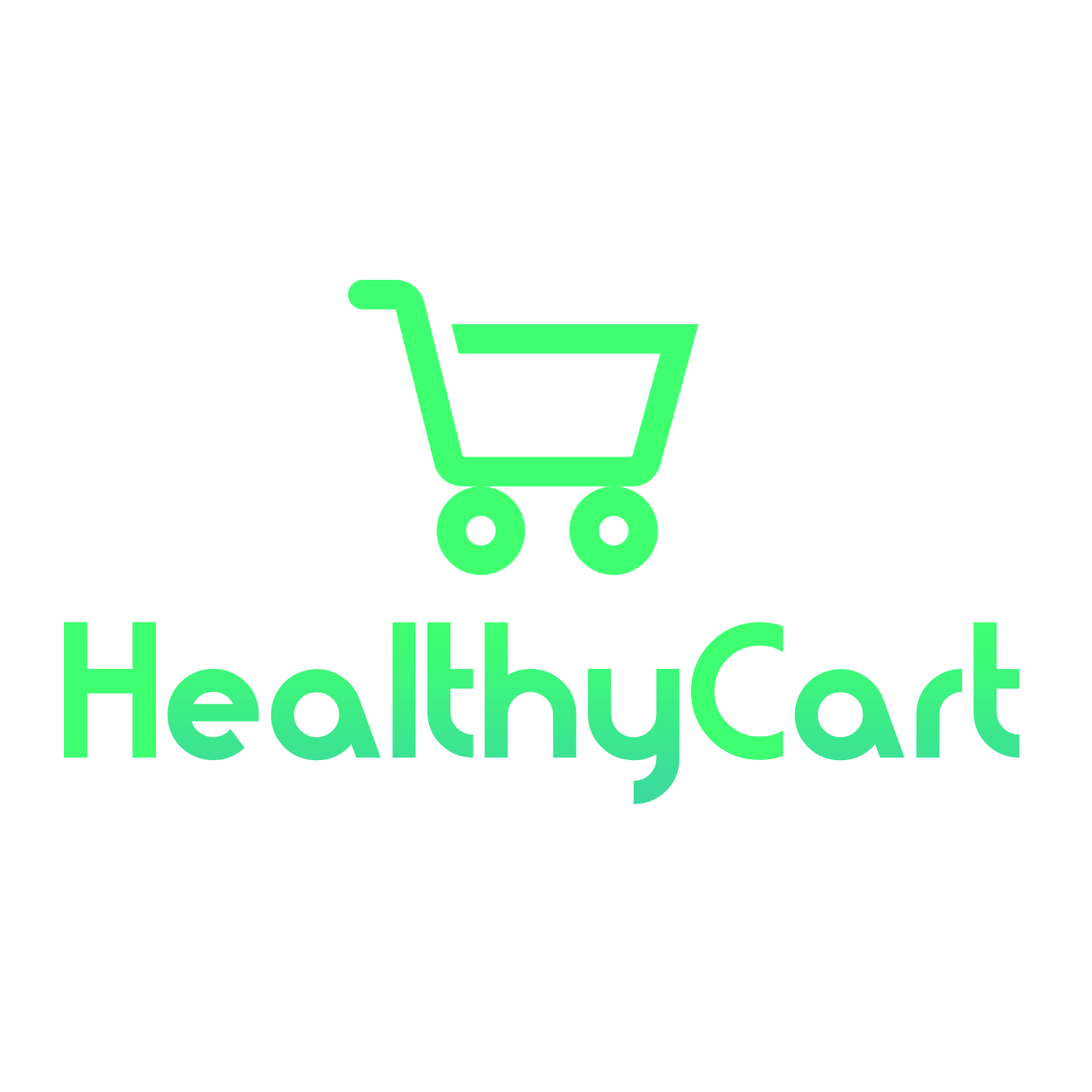
<style>
.page{position:relative;width:1092px;height:1092px;background:#ffffff}
.page>*{position:absolute;margin:0}
.t1{font:170.6px "Moderna";color:#3df281}
</style>
<div class="page">
<p class="t1" style="left:64px;top:622px;width:955px;height:182px">HealthyCart</p>
<p class="t1" style="left:64px;top:622px;width:955px;height:182px">HealthyCart</p>
</div>
